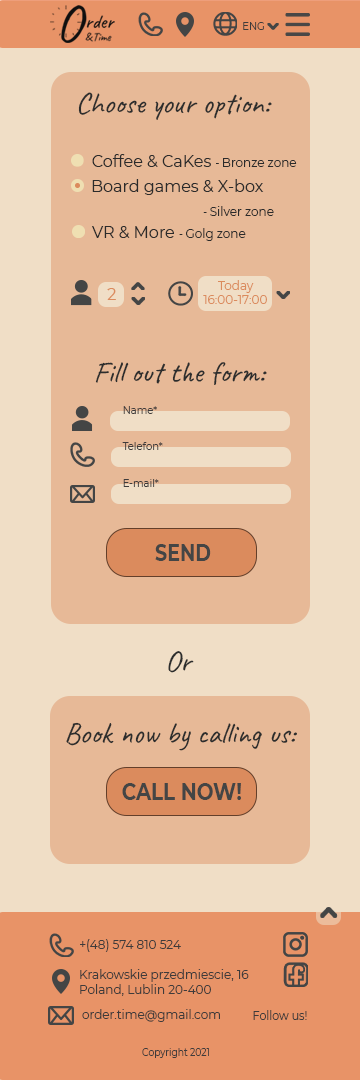
<style>
.page{position:relative;width:360px;height:1080px;background:#e7b997}
.page>*{position:absolute;margin:0}
.t1{font:10px "Montserrat-Regular";color:#3e3b3b}
.t2{font:30px "Caveat-Regular";color:#2c2d2d}
.t3{font:16px "Montserrat-Regular";color:#2b2b2b}
.t4{font:10px "Montserrat-Regular";color:#2b2b2b}
.t5{font:12px "Montserrat-Regular";color:#2b2b2b}
.t6{font:16px/24px "Montserrat-Regular";color:#2b2b2b}
.t7{font:10px/24px "Montserrat-Regular";color:#2b2b2b}
.t8{font:12px/24px "Montserrat-Regular";color:#2b2b2b}
.t9{font:12px "Montserrat-Regular";color:#db8b5d}
.t10{font:16px "Montserrat-Regular";color:#db8b5d}
.t11{font:23.9px "Montserrat-Bold";color:#444545;scale:0.79 1}
.t12{font:24px "Montserrat-Bold";color:#444545;scale:0.83 1}
.t13{font:12px "Montserrat-Regular";color:#3e3b3b}
.t14{font:12px "Montserrat-Regular";color:#3e3b3b;scale:0.92 1}
.t15{font:10px "Montserrat-Regular";color:#3e3b3b;scale:0.92 1}
</style>
<div class="page">
<p class="t1" style="left:243px;top:22px;width:21px;height:8px">ENG</p>
<p class="t2" style="left:78px;top:92px;width:194px;height:28px">Choose your option:</p>
<p class="t3" style="left:92px;top:154px;width:205px;height:13px">Coffee &amp; CaKes <span class="t4">- </span><span class="t5">Bronze zone</span></p>
<p class="t6" style="left:92px;top:179px;width:182px;height:37px;text-align:justify">Board games &amp; X-box<br>    <span class="t7">- </span><span class="t8">Silver zone</span></p>
<p class="t3" style="left:92px;top:226px;width:154px;height:15px">VR &amp; More <span class="t4">- </span><span class="t5">Golg zone</span></p>
<p class="t9" style="left:218px;top:280px;width:36px;height:13px">Today</p>
<p class="t10" style="left:107px;top:288px;width:9px;height:12px">2</p>
<p class="t9" style="left:203px;top:295px;width:64px;height:9px">16:00-17:00</p>
<p class="t2" style="left:95px;top:362px;width:172px;height:23px">Fill out the form:</p>
<p class="t1" style="left:123px;top:406px;width:34px;height:8px">Name*</p>
<p class="t1" style="left:122px;top:442px;width:41px;height:8px">Telefon*</p>
<p class="t1" style="left:123px;top:479px;width:36px;height:8px">E-mail*</p>
<p class="t11" style="left:155px;top:544px;width:56px;height:17px">SEND</p>
<p class="t2" style="left:168px;top:651px;width:26px;height:22px">Or</p>
<p class="t2" style="left:66px;top:722px;width:231px;height:29px">Book now by calling us:</p>
<p class="t12" style="left:122px;top:783px;width:119px;height:17px">CALL NOW!</p>
<p class="t13" style="left:80px;top:939px;width:101px;height:13px">+(48) 574 810 524</p>
<p class="t13" style="left:80px;top:969px;width:169px;height:27px;text-align:justify">Krakowskie przedmiescie, 16<br>Poland, Lublin 20-400</p>
<p class="t13" style="left:82px;top:1009px;width:138px;height:13px">order.time@gmail.com</p>
<p class="t14" style="left:253px;top:1010px;width:54px;height:10px">Follow us!</p>
<p class="t15" style="left:142px;top:1048px;width:67px;height:10px">Copyright 2021</p>
</div>
